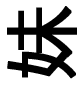
<style>
.page{position:relative;width:81px;height:85px;background:#ffffff}
.page>*{position:absolute;margin:0}
.t1{font:72px "MicrosoftYaHei";color:#000000;font-weight:bold}
</style>
<div class="page">
<p class="t1" style="left:7px;top:6px;width:70px;height:73px;rotate:-90deg">妹</p>
</div>
